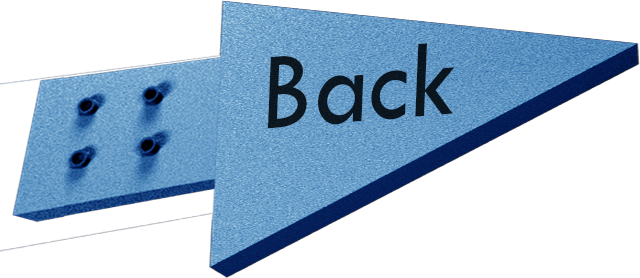
<style>
.page{position:relative;width:640px;height:278px;background:#ffffff}
.page>*{position:absolute;margin:0}
.t1{font:114.7px "TwCenMT-Regular";color:#000000;scale:0.9 1}
</style>
<div class="page">
<p class="t1" style="left:267px;top:43px;width:188px;height:86px;rotate:-5deg;opacity:0.92">Back</p>
</div>
